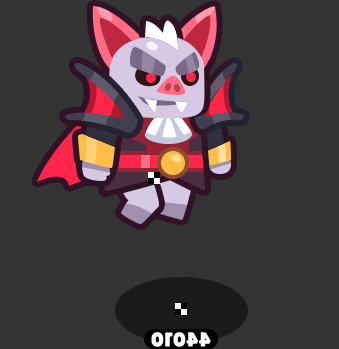
<style>
.page{position:relative;width:339px;height:349px;background:#333333}
.page>*{position:absolute;margin:0}
.t1{font:19.9px "LilitaOne";color:#ffffff;font-weight:bold}
</style>
<div class="page">
<p class="t1" style="left:151px;top:332px;width:60px;height:15px;rotate:180deg">44010</p>
</div>
